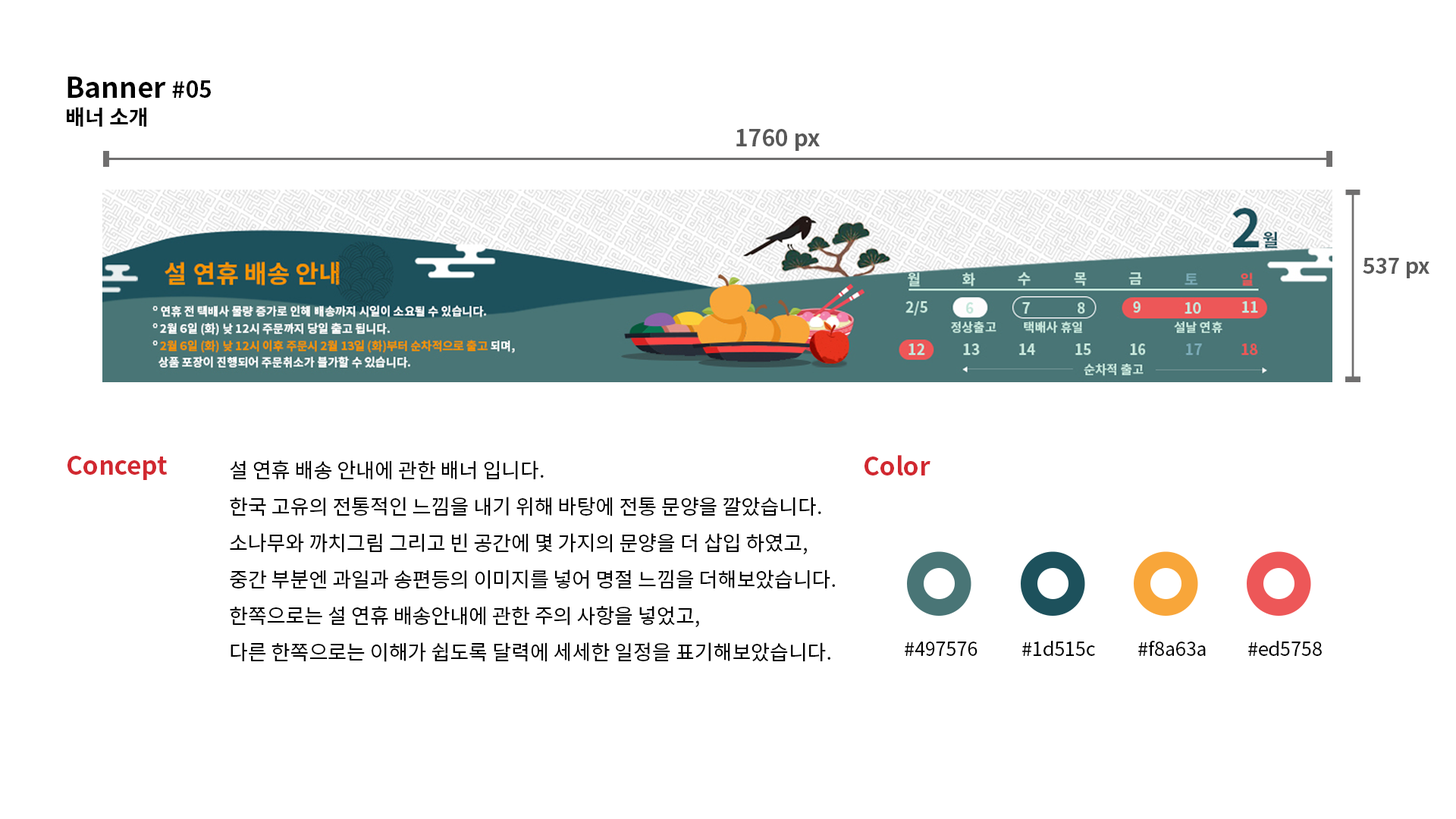
<style>
.page{position:relative;width:1456px;height:819px;background:#ffffff}
.page>*{position:absolute;margin:0}
.t1{font:28.1px/27.3px "NotoSansCJKkr-Bold";color:#000000}
.t2{font:22.7px/27.3px "NotoSansCJKkr-Bold";color:#000000}
.t3{font:21.2px/27.3px "NotoSansCJKkr-Bold";color:#000000}
.t4{font:22.7px "NotoSansCJKkr-Bold";color:#585858}
.t5{font:21.2px "NotoSansCJKkr-Bold";color:#585858}
.t6{font:25px "NotoSansCJKkr-Bold";color:#d12830}
.t7{font:20.5px/36.4px "NotoSansCJKkr-Regular";color:#000000}
.t8{font:19px "NotoSansCJKkr-Regular";color:#000000}
</style>
<div class="page">
<p class="t1" style="left:67px;top:77px;width:144px;height:50px">Banner <span class="t2">#05<br></span><span class="t3">배너 소개</span></p>
<p class="t4" style="left:736px;top:129px;width:84px;height:22px">1760 px</p>
<p class="t5" style="left:1363px;top:258px;width:66px;height:20px">537 px</p>
<p class="t6" style="left:67px;top:456px;width:100px;height:24px">Concept</p>
<p class="t7" style="left:230px;top:460px;width:605px;height:202px">설 연휴 배송 안내에 관한 배너 입니다.<br>한국 고유의 전통적인 느낌을 내기 위해 바탕에 전통 문양을 깔았습니다.<br>소나무와 까치그림 그리고 빈 공간에 몇 가지의 문양을 더 삽입 하였고,<br>중간 부분엔 과일과 송편등의 이미지를 넣어 명절 느낌을 더해보았습니다.<br>한쪽으로는 설 연휴 배송안내에 관한 주의 사항을 넣었고, <br>다른 한쪽으로는 이해가 쉽도록 달력에 세세한 일정을 표기해보았습니다.</p>
<p class="t6" style="left:864px;top:455px;width:66px;height:20px">Color</p>
<p class="t8" style="left:905px;top:642px;width:72px;height:14px">#497576</p>
<p class="t8" style="left:1022px;top:641px;width:73px;height:15px">#1d515c</p>
<p class="t8" style="left:1138px;top:640px;width:68px;height:16px">#f8a63a</p>
<p class="t8" style="left:1248px;top:641px;width:74px;height:15px">#ed5758</p>
</div>
